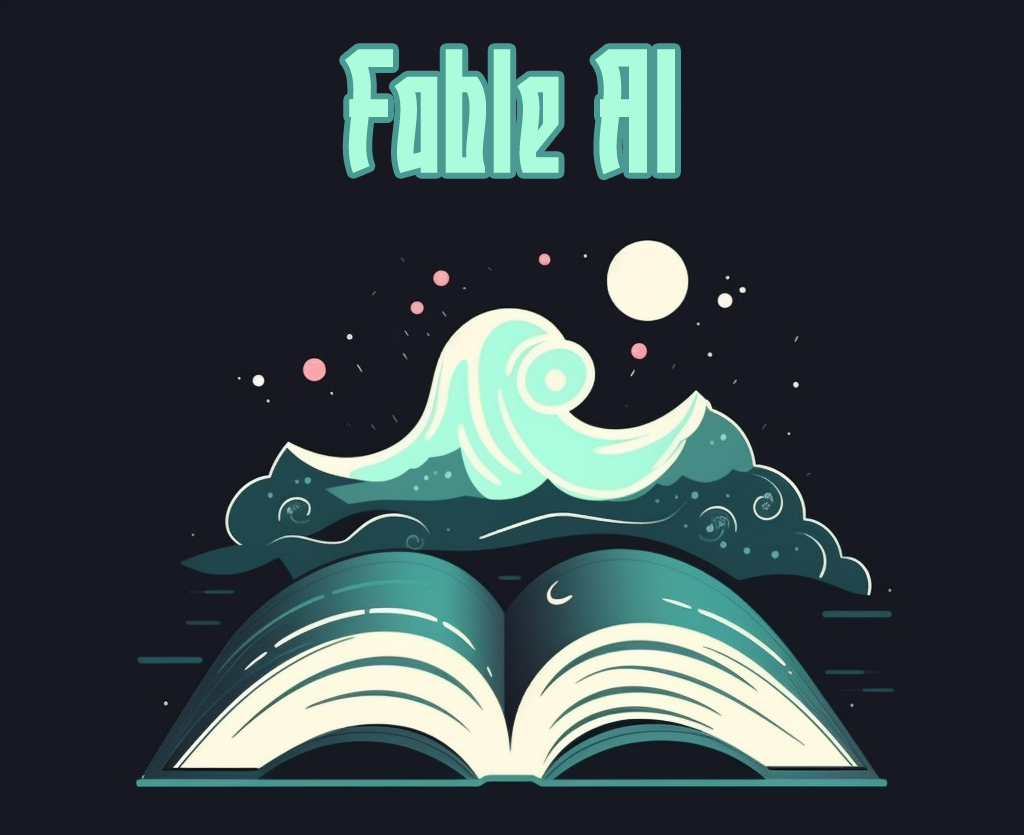
<style>
.page{position:relative;width:1024px;height:835px;background:#171822}
.page>*{position:absolute;margin:0}
.t1{font:176.3px "FAGUMEHtrial-Regular";letter-spacing:0.01em;color:#abfcdd}
</style>
<div class="page">
<p class="t1" style="left:345px;top:49px;width:330px;height:126px">Fable AI</p>
</div>
